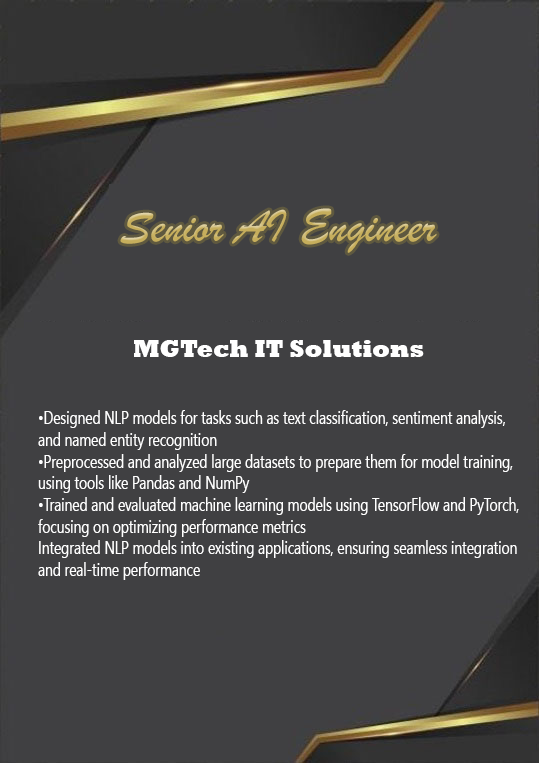
<style>
.page{position:relative;width:539px;height:763px;background:#404042}
.page>*{position:absolute;margin:0}
.t1{font:48px "BrushScriptMT";color:#c6ae5c}
.t2{font:24px "Rockwell-ExtraBold";color:#ffffff}
.t3{font:18px "SegoeUISymbol";color:#ffffff;scale:0.76 1}
</style>
<div class="page">
<p class="t1" style="left:120px;top:208px;width:317px;height:45px">Senior AI Engineer</p>
<p class="t2" style="left:134px;top:340px;width:290px;height:17px">MGTech IT Solutions</p>
<p class="t3" style="left:38px;top:410px;width:481px;height:170px">•Designed NLP models for tasks such as text classification, sentiment analysis, <br>and named entity recognition<br>•Preprocessed and analyzed large datasets to prepare them for model training, <br>using tools like Pandas and NumPy<br>•Trained and evaluated machine learning models using TensorFlow and PyTorch, <br>focusing on optimizing performance metrics<br>Integrated NLP models into existing applications, ensuring seamless integration <br>and real-time performance</p>
</div>
